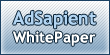
<style>
.page{position:relative;width:110px;height:55px}
.page>*{position:absolute;margin:0}
.t1{font:15px "TrebuchetMS-Bold";color:#ffffff}
.t2{font:18px "TrebuchetMS-Bold";color:#b3d5f2}
</style>
<div class="page">
<p class="t1" style="left:13px;top:10px;width:83px;height:36px"><span class="t2">AdSapient<br></span>WhitePaper</p>
</div>
